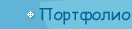
<style>
.page{position:relative;width:132px;height:29px;background:#74c4df}
.page>*{position:absolute;margin:0}
.t1{font:16px "ComicSansMS";color:#006699}
</style>
<div class="page">
<p class="t1" style="left:39px;top:8px;width:92px;height:17px">Портфолио</p>
</div>
